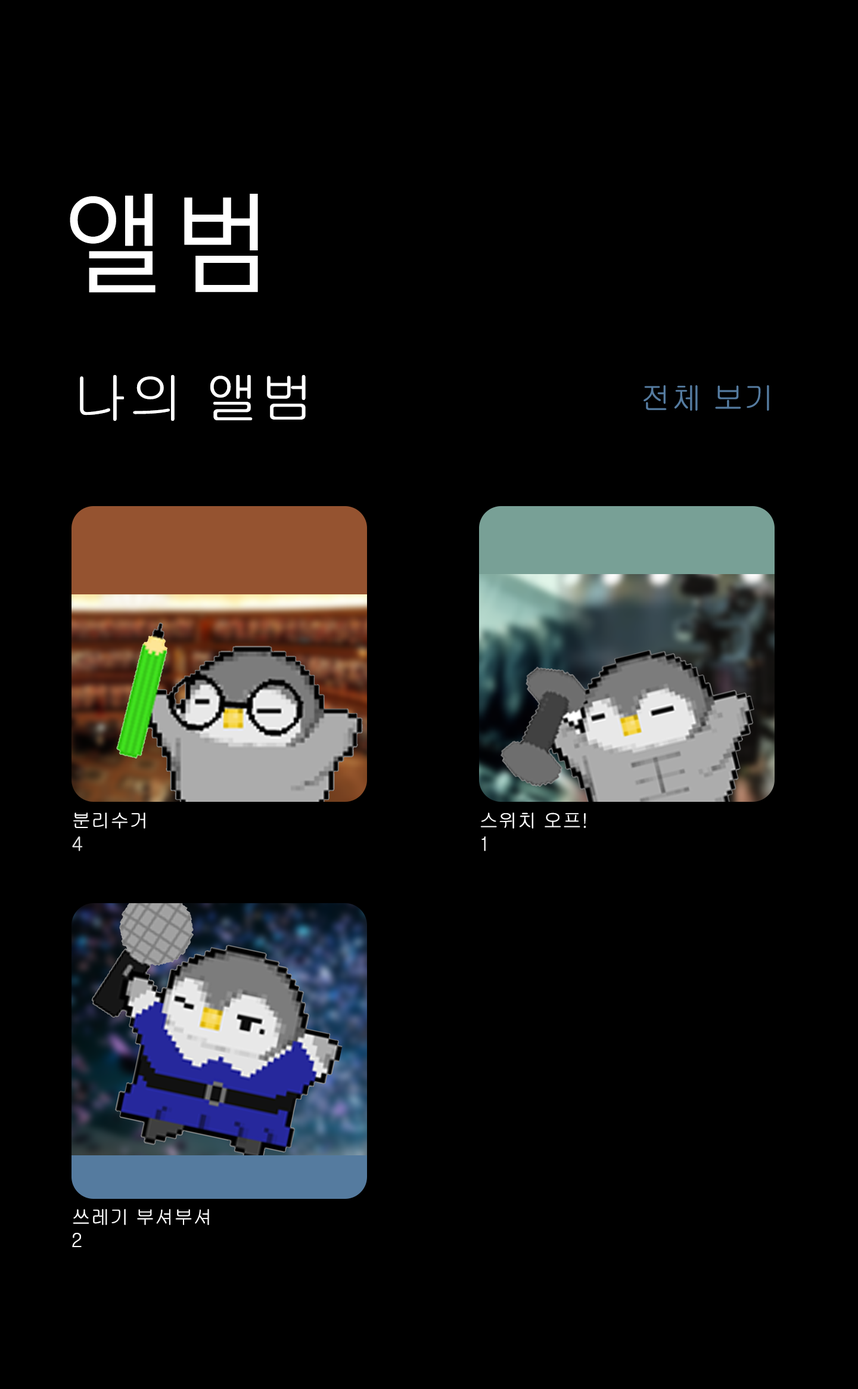
<style>
.page{position:relative;width:858px;height:1389px;background:#000000}
.page>*{position:absolute;margin:0}
.t1{font:107px "MalgunGothic";color:#ffffff}
.t2{font:56.2px "Gulim";color:#ffffff}
.t3{font:31px "Gulim";color:#557b9f}
.t4{font:19.2px "Gulim";color:#ffffff}
.t5{font:19.2px "Gulim";color:#e0e0e0}
</style>
<div class="page">
<p class="t1" style="left:70px;top:194px;width:188px;height:99px">앨범</p>
<p class="t2" style="left:80px;top:375px;width:226px;height:46px">나의 앨범</p>
<p class="t3" style="left:644px;top:385px;width:126px;height:26px">전체 보기</p>
<p class="t4" style="left:72px;top:813px;width:73px;height:38px">분리수거<br><span class="t5">4</span></p>
<p class="t4" style="left:480px;top:813px;width:107px;height:38px">스위치 오프!<br>1</p>
<p class="t4" style="left:72px;top:1209px;width:137px;height:38px">쓰레기 부셔부셔<br>2</p>
</div>
